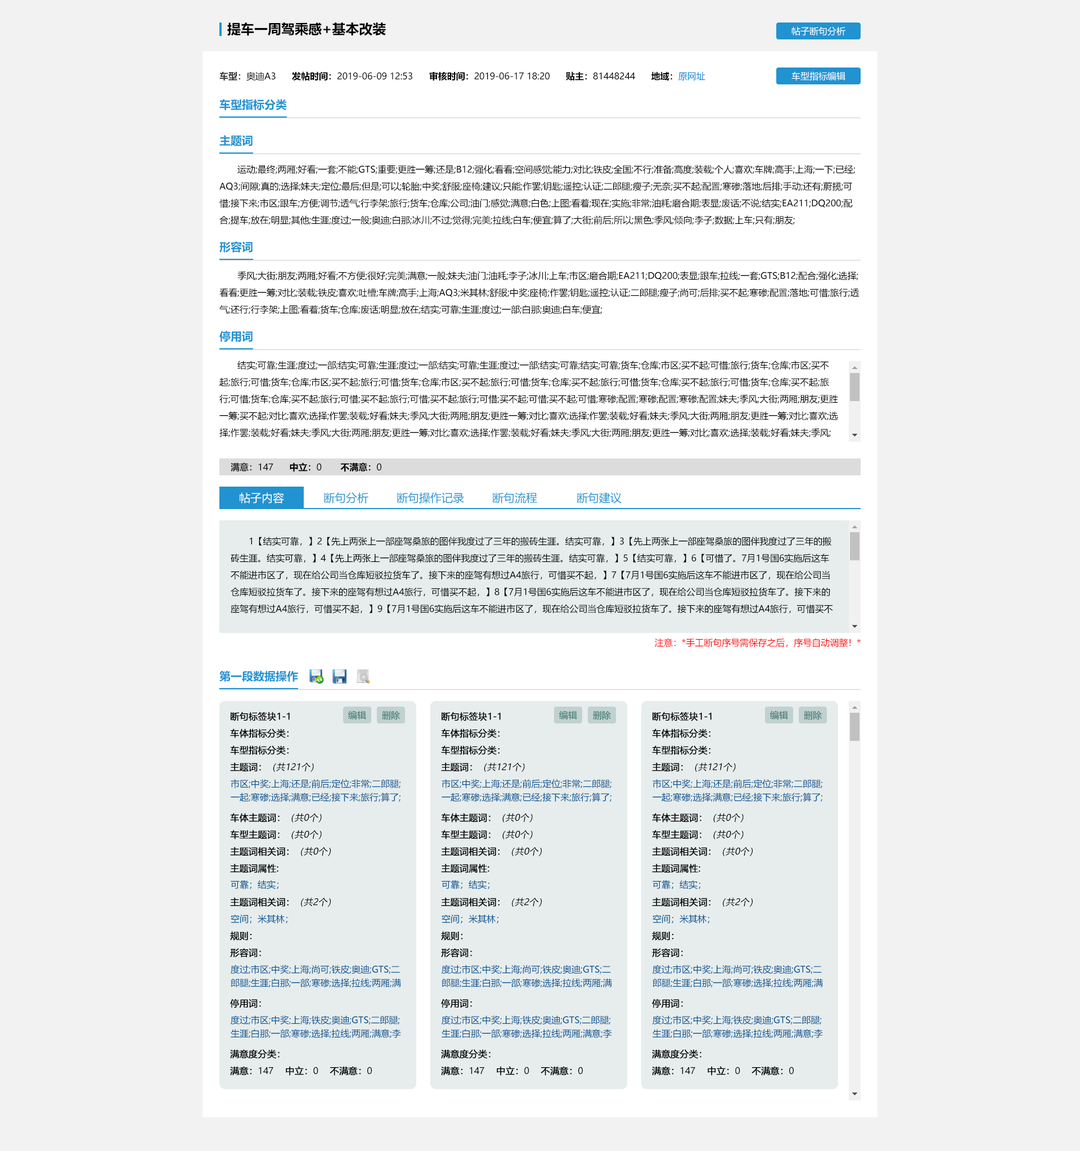
<style>
.page{position:relative;width:1080px;height:1151px;background:#f2f2f2}
.page>*{position:absolute;margin:0}
.t1{font:13.5px "MicrosoftYaHei-Bold";color:#000000}
.t2{font:9px "MicrosoftYaHei";color:#fffefe}
.t3{font:9px "MicrosoftYaHei";color:#000000}
.t4{font:9px "MicrosoftYaHei-Bold";color:#333333}
.t5{font:9px "MicrosoftYaHei-Bold";color:#000000}
.t6{font:9px "MicrosoftYaHei";color:#0087d7}
.t7{font:11.2px "MicrosoftYaHei-Bold";color:#2193d1}
.t8{font:9px/16.9px "MicrosoftYaHei";color:#000000}
.t9{font:11.2px "MicrosoftYaHei";color:#ffffff}
.t10{font:11.2px "MicrosoftYaHei";color:#2193d1}
.t11{font:9px "MicrosoftYaHei";color:#ff0000}
.t12{font:9px/16.9px "MicrosoftYaHei";color:#000000;font-weight:bold}
.t13{font:9px/16.9px "MicrosoftYaHei";color:#000000;font-style:italic}
.t14{font:9px "MicrosoftYaHei";color:#316e6a}
.t15{font:9px/13.5px "MicrosoftYaHei";color:#015293}
.t16{font:9px "MicrosoftYaHei";color:#015293}
</style>
<div class="page">
<p class="t1" style="left:227px;top:22px;width:159px;height:14px">提车一周驾乘感+基本改装</p>
<p class="t2" style="left:791px;top:26px;width:54px;height:10px">帖子断句分析</p>
<p class="t3" style="left:219px;top:71px;width:486px;height:10px"><span class="t4">车型：</span>奥迪A3      <span class="t5">发帖时间：</span>2019-06-09 12:53<span class="t5">      审核时间：</span>2019-06-17 18:20      <span class="t5">贴主：</span>81448244<span class="t5">      地域：</span><span class="t6">原网址</span></p>
<p class="t2" style="left:791px;top:71px;width:54px;height:10px">车型指标编辑</p>
<p class="t7" style="left:219px;top:99px;width:68px;height:11px">车型指标分类</p>
<p class="t7" style="left:219px;top:135px;width:34px;height:11px">主题词</p>
<p class="t8" style="left:219px;top:165px;width:636px;height:59px">运动;最终;两厢;好看;一套;不能;GTS;重要;更胜一筹;还是;B12;强化;看看;空间感觉;能力;对比;铁皮;全国;不行;准备;高度;装载;个人;喜欢;车牌;高手;上海;一下;已经;AQ3;间隙;真的;选择;妹夫;定位;最后;但是;可以;轮胎;中奖;舒服;座椅;建议;只能;作罢;钥匙;遥控;认证;二郎腿;瘦子;无奈;买不起;配置;寒碜;落地;后排;手动;还有;蔚揽;可惜;接下来;市区;跟车;方便;调节;透气;行李架;旅行;货车;仓库;公司;油门;感觉;满意;白色;上图;看着;现在;实施;非常;油耗;磨合期;表显;废话;不说;结实;EA211;DQ200;配合;提车;放在;明显;其他;生涯;度过;一般;奥迪;白那;冰川;不过;觉得;完美;拉线;白车;便宜;算了;大街;前后;所以;黑色;季风;倾向;李子;数据;上车;只有;朋友;</p>
<p class="t7" style="left:219px;top:241px;width:34px;height:12px">形容词</p>
<p class="t8" style="left:219px;top:271px;width:641px;height:43px">季风;大街;朋友;两厢;好看;不方便;很好;完美;满意;一般;妹夫;油门;油耗;李子;冰川;上车;市区;磨合期;EA211;DQ200;表显;跟车;拉线;一套;GTS;B12;配合;强化;选择;看看;更胜一筹;对比;装载;铁皮;喜欢;吐槽;车牌;高手;上海;AQ3;米其林;舒服;中奖;座椅;作罢;钥匙;遥控;认证;二郎腿;瘦子;尚可;后排;买不起;寒碜;配置;落地;可惜;旅行;透气;还行;行李架;上图;看着;货车;仓库;废话;明显;放在;结实;可靠;生涯;度过;一部;白那;奥迪;白车;便宜;</p>
<p class="t7" style="left:219px;top:331px;width:34px;height:11px">停用词</p>
<p class="t8" style="left:219px;top:361px;width:619px;height:76px">结实;可靠;生涯;度过;一部;结实;可靠;生涯;度过;一部;结实;可靠;生涯;度过;一部;结实;可靠;结实;可靠;货车;仓库;市区;买不起;可惜;旅行;货车;仓库;市区;买不起;旅行;可惜;货车;仓库;市区;买不起;旅行;可惜;货车;仓库;市区;买不起;旅行;可惜;货车;仓库;买不起;旅行;可惜;货车;仓库;买不起;旅行;可惜;货车;仓库;买不起;旅行;可惜;货车;仓库;买不起;旅行;可惜;买不起;旅行;可惜;买不起;旅行;可惜;买不起;可惜;买不起;可惜;寒碜;配置;寒碜;配置;寒碜;配置;妹夫;季风;大街;两厢;朋友;更胜一筹;买不起;对比;喜欢;选择;作罢;装载;好看;妹夫;季风;大街;两厢;朋友;更胜一筹;对比;喜欢;选择;作罢;装载;好看;妹夫;季风;大街;两厢;朋友;更胜一筹;对比;喜欢;选择;作罢;装载;好看;妹夫;季风;大街;两厢;朋友;更胜一筹;对比;喜欢;选择;作罢;装载;好看;妹夫;季风;大街;两厢;朋友;更胜一筹;对比;喜欢;选择;装载;好看;妹夫;季风;</p>
<p class="t5" style="left:231px;top:462px;width:150px;height:10px"><span class="t4">满意：</span><span class="t3">147      </span>中立：<span class="t3">0</span>       不满意：<span class="t3">0</span></p>
<p class="t9" style="left:240px;top:492px;width:44px;height:11px">帖子内容</p>
<p class="t10" style="left:324px;top:492px;width:44px;height:11px">断句分析</p>
<p class="t10" style="left:397px;top:492px;width:67px;height:11px">断句操作记录</p>
<p class="t10" style="left:493px;top:492px;width:44px;height:11px">断句流程</p>
<p class="t10" style="left:577px;top:492px;width:45px;height:11px">断句建议</p>
<p class="t8" style="left:231px;top:537px;width:602px;height:77px">1【结实可靠，】2【先上两张上一部座驾桑旅的图伴我度过了三年的搬砖生涯。结实可靠，】3【先上两张上一部座驾桑旅的图伴我度过了三年的搬砖生涯。结实可靠，】4【先上两张上一部座驾桑旅的图伴我度过了三年的搬砖生涯。结实可靠，】5【结实可靠，】6【可惜了。7月1号国6实施后这车不能进市区了，现在给公司当仓库短驳拉货车了。接下来的座驾有想过A4旅行，可惜买不起，】7【7月1号国6实施后这车不能进市区了，现在给公司当仓库短驳拉货车了。接下来的座驾有想过A4旅行，可惜买不起，】8【7月1号国6实施后这车不能进市区了，现在给公司当仓库短驳拉货车了。接下来的座驾有想过A4旅行，可惜买不起，】9【7月1号国6实施后这车不能进市区了，现在给公司当仓库短驳拉货车了。接下来的座驾有想过A4旅行，可惜买不起的</p>
<p class="t11" style="left:655px;top:638px;width:206px;height:9px">注意：*手工断句序号需保存之后，序号自动调整！*</p>
<p class="t7" style="left:219px;top:670px;width:79px;height:12px">第一段数据操作</p>
<p class="t12" style="left:230px;top:712px;width:142px;height:364px">断句标签块1-1<br>车体指标分类：<br>车型指标分类：<br>主题词：<span class="t13">（共121个）<br></span><br><br>车体主题词：<span class="t13">（共0个）<br></span>车型主题词：<span class="t13">（共0个）<br></span>主题词相关词：<span class="t13">（共0个）<br></span>主题词属性:<br><br>主题词相关词：<span class="t13">（共2个）<br><br></span>规则：<br>形容词：<br><br><br>停用词：<br><br><br>满意度分类：<br>满意：<span class="t8">147</span>    中立：<span class="t8">0</span>    不满意：<span class="t8">0</span></p>
<p class="t14" style="left:348px;top:710px;width:18px;height:9px">编辑</p>
<p class="t14" style="left:382px;top:710px;width:18px;height:10px">删除</p>
<p class="t12" style="left:441px;top:712px;width:142px;height:364px">断句标签块1-1<br>车体指标分类：<br>车型指标分类：<br>主题词：<span class="t13">（共121个）<br></span><br><br>车体主题词：<span class="t13">（共0个）<br></span>车型主题词：<span class="t13">（共0个）<br></span>主题词相关词：<span class="t13">（共0个）<br></span>主题词属性:<br><br>主题词相关词：<span class="t13">（共2个）<br><br></span>规则：<br>形容词：<br><br><br>停用词：<br><br><br>满意度分类：<br>满意：<span class="t8">147</span>    中立：<span class="t8">0</span>    不满意：<span class="t8">0</span></p>
<p class="t14" style="left:559px;top:710px;width:18px;height:9px">编辑</p>
<p class="t14" style="left:593px;top:710px;width:18px;height:10px">删除</p>
<p class="t12" style="left:652px;top:712px;width:142px;height:364px">断句标签块1-1<br>车体指标分类：<br>车型指标分类：<br>主题词：<span class="t13">（共121个）<br></span><br><br>车体主题词：<span class="t13">（共0个）<br></span>车型主题词：<span class="t13">（共0个）<br></span>主题词相关词：<span class="t13">（共0个）<br></span>主题词属性:<br><br>主题词相关词：<span class="t13">（共2个）<br><br></span>规则：<br>形容词：<br><br><br>停用词：<br><br><br>满意度分类：<br>满意：<span class="t8">147</span>    中立：<span class="t8">0</span>    不满意：<span class="t8">0</span></p>
<p class="t14" style="left:770px;top:710px;width:18px;height:9px">编辑</p>
<p class="t14" style="left:804px;top:710px;width:18px;height:10px">删除</p>
<p class="t15" style="left:231px;top:779px;width:169px;height:23px">市区;中奖;上海;还是;前后;定位;非常;二郎腿;一起;寒碜;选择;满意;已经;接下来;旅行;算了;</p>
<p class="t15" style="left:442px;top:779px;width:169px;height:23px">市区;中奖;上海;还是;前后;定位;非常;二郎腿;一起;寒碜;选择;满意;已经;接下来;旅行;算了;</p>
<p class="t15" style="left:652px;top:779px;width:170px;height:23px">市区;中奖;上海;还是;前后;定位;非常;二郎腿;一起;寒碜;选择;满意;已经;接下来;旅行;算了;</p>
<p class="t16" style="left:231px;top:880px;width:47px;height:9px">可靠；结实；</p>
<p class="t16" style="left:442px;top:880px;width:47px;height:9px">可靠；结实；</p>
<p class="t16" style="left:652px;top:880px;width:48px;height:9px">可靠；结实；</p>
<p class="t16" style="left:231px;top:914px;width:56px;height:10px">空间；米其林；</p>
<p class="t16" style="left:442px;top:914px;width:56px;height:10px">空间；米其林；</p>
<p class="t16" style="left:652px;top:914px;width:57px;height:10px">空间；米其林；</p>
<p class="t15" style="left:231px;top:965px;width:170px;height:22px">度过;市区;中奖;上海;尚可;铁皮;奥迪;GTS;二郎腿;生涯;白那;一部;寒碜;选择;拉线;两厢;满意;</p>
<p class="t15" style="left:442px;top:965px;width:170px;height:22px">度过;市区;中奖;上海;尚可;铁皮;奥迪;GTS;二郎腿;生涯;白那;一部;寒碜;选择;拉线;两厢;满意;</p>
<p class="t15" style="left:652px;top:965px;width:171px;height:22px">度过;市区;中奖;上海;尚可;铁皮;奥迪;GTS;二郎腿;生涯;白那;一部;寒碜;选择;拉线;两厢;满意;</p>
<p class="t15" style="left:231px;top:1015px;width:170px;height:23px">度过;市区;中奖;上海;铁皮;奥迪;GTS;二郎腿;生涯;白那;一部;寒碜;选择;拉线;两厢;满意;李子;</p>
<p class="t15" style="left:442px;top:1015px;width:170px;height:23px">度过;市区;中奖;上海;铁皮;奥迪;GTS;二郎腿;生涯;白那;一部;寒碜;选择;拉线;两厢;满意;李子;</p>
<p class="t15" style="left:652px;top:1015px;width:171px;height:23px">度过;市区;中奖;上海;铁皮;奥迪;GTS;二郎腿;生涯;白那;一部;寒碜;选择;拉线;两厢;满意;李子;</p>
</div>
